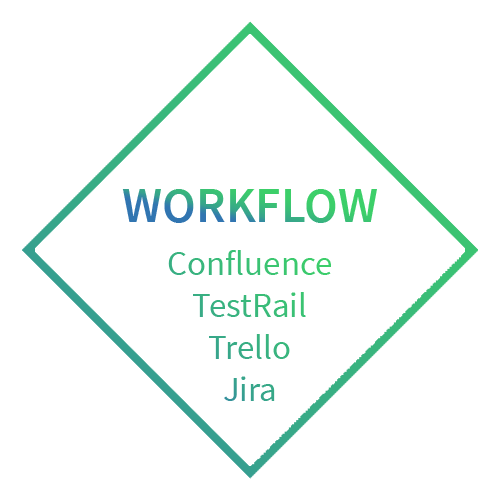
<style>
.page{position:relative;width:500px;height:500px;background:#ffffff}
.page>*{position:absolute;margin:0}
.t1{font:50px "SourceSansPro-SemiBold"}
.t2{font:35px "SourceSansPro-Regular";color:#39b67d}
</style>
<div class="page">
<p class="t1" style="left:122px;top:189px;width:255px;height:34px">WORKFLOW</p>
<p class="t2" style="left:168px;top:250px;width:163px;height:151px;text-align:center">Confluence<br>TestRail<br>Trello<br>Jira</p>
</div>
